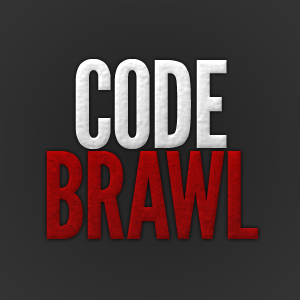
<style>
.page{position:relative;width:300px;height:300px}
.page>*{position:absolute;margin:0}
.t1{font:120px/91px "LeagueGothic";letter-spacing:-0.025em}
.t2{font:120px/91px "LeagueGothic"}
.t3{font:120px/91px "LeagueGothic";letter-spacing:-0.05em}
</style>
<div class="page">
<p class="t1" style="left:46px;top:59px;width:212px;height:180px;text-align:center">CODE<br>B<span class="t2">R</span><span class="t3">A</span>WL</p>
</div>
